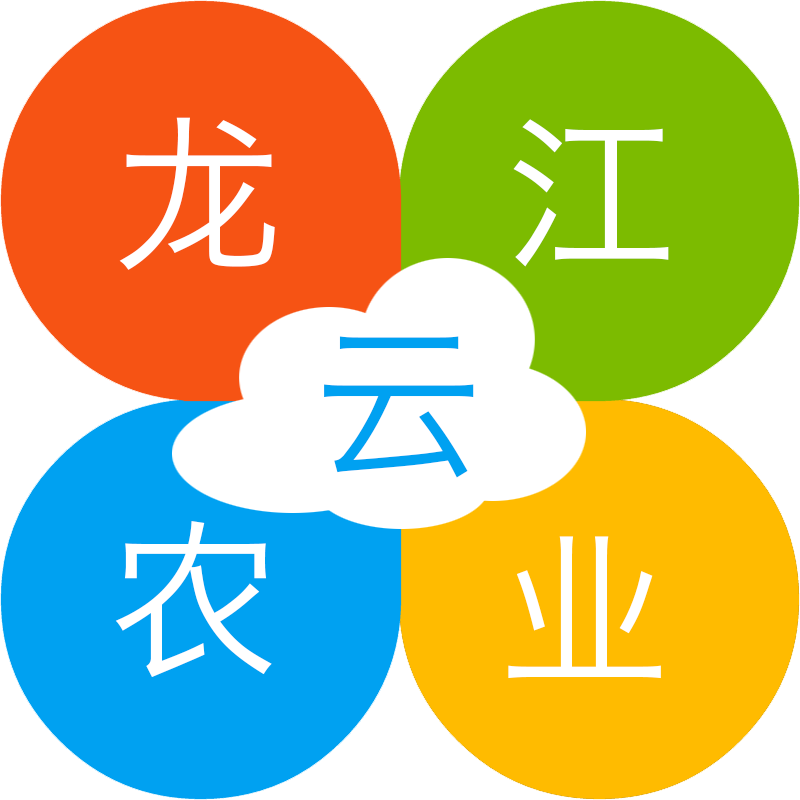
<style>
.page{position:relative;width:800px;height:800px;background:#ffffff}
.page>*{position:absolute;margin:0}
.t1{font:170.6px "HiraginoSansGB-W3";color:#ffffff}
.t2{font:170.6px "HiraginoSansGB-W3";color:#00a1f1}
</style>
<div class="page">
<p class="t1" style="left:119px;top:117px;width:156px;height:153px">龙</p>
<p class="t1" style="left:513px;top:119px;width:156px;height:148px">江</p>
<p class="t2" style="left:324px;top:336px;width:150px;height:142px">云</p>
<p class="t1" style="left:115px;top:521px;width:157px;height:156px">农</p>
<p class="t1" style="left:508px;top:536px;width:153px;height:143px">业</p>
</div>
